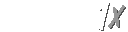
<style>
.page{position:relative;width:128px;height:32px;background:#ffffff}
.page>*{position:absolute;margin:0}
.t1{font:29.7px "DomDiagonalBT-Regular";letter-spacing:0.075em;color:#969696}
.t2{font:29.7px "DomDiagonalBT-Regular";letter-spacing:0.075em}
</style>
<div class="page">
<p class="t1" style="left:108px;top:5px;width:17px;height:23px">X</p>
<p class="t2" style="left:109px;top:6px;width:17px;height:23px">X</p>
</div>
